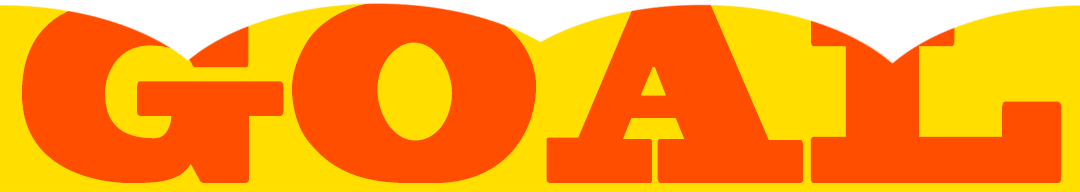
<style>
.page{position:relative;width:1080px;height:192px;background:#ff4e00}
.page>*{position:absolute;margin:0}
.t1{font:244.4px "BlackoakStd";color:#ff4e00;scale:0.59 1}
</style>
<div class="page">
<p class="t1" style="left:22px;top:0px;width:1040px;height:183px">GOAL</p>
</div>
